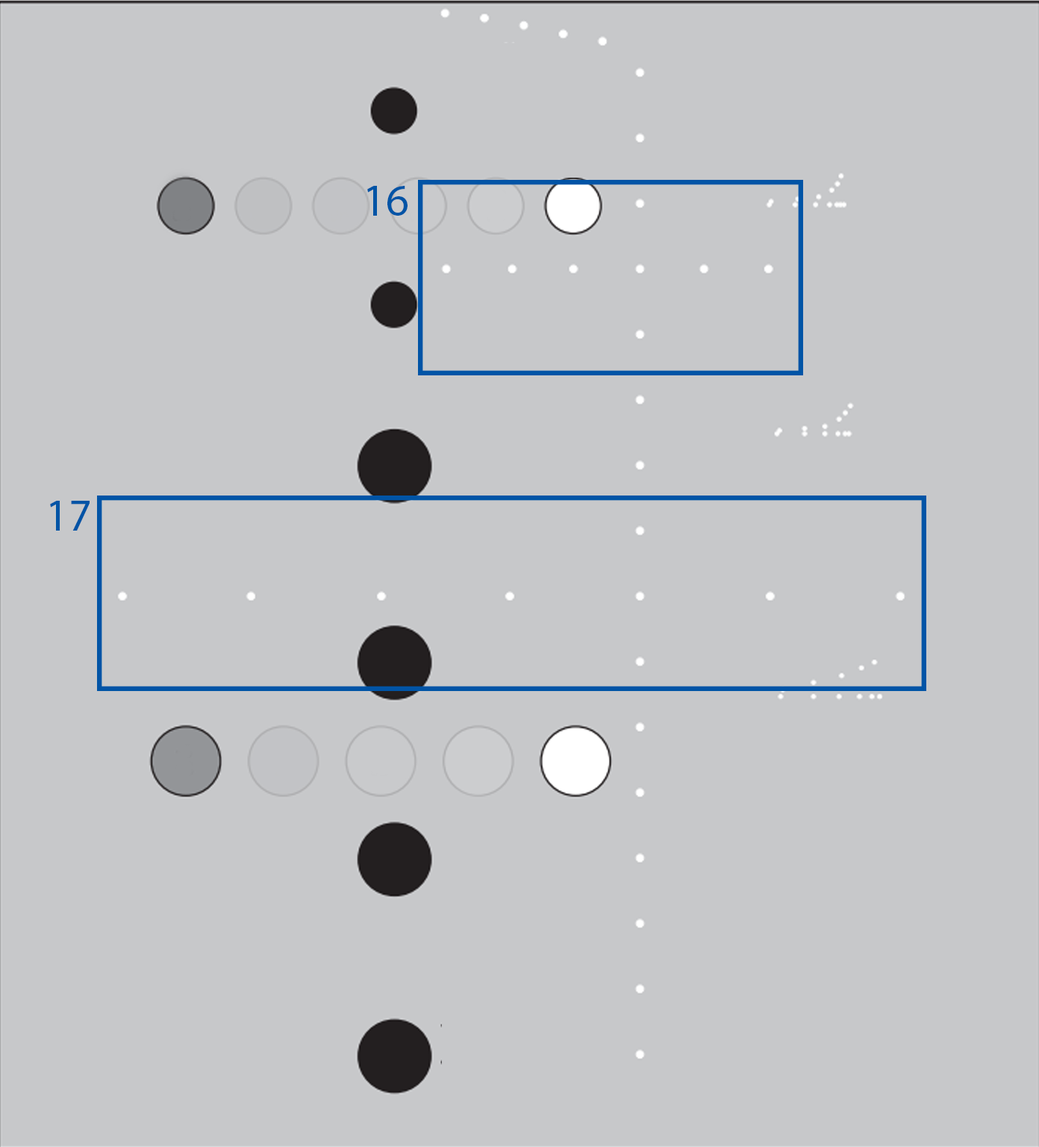
<style>
.page{position:relative;width:1039px;height:1147px;background:#c7c8ca}
.page>*{position:absolute;margin:0}
.t1{font:44.8px "MyriadPro-Regular";color:#0054a6}
</style>
<div class="page">
<p class="t1" style="left:367px;top:186px;width:41px;height:30px">16</p>
<p class="t1" style="left:50px;top:501px;width:40px;height:30px">17</p>
</div>
